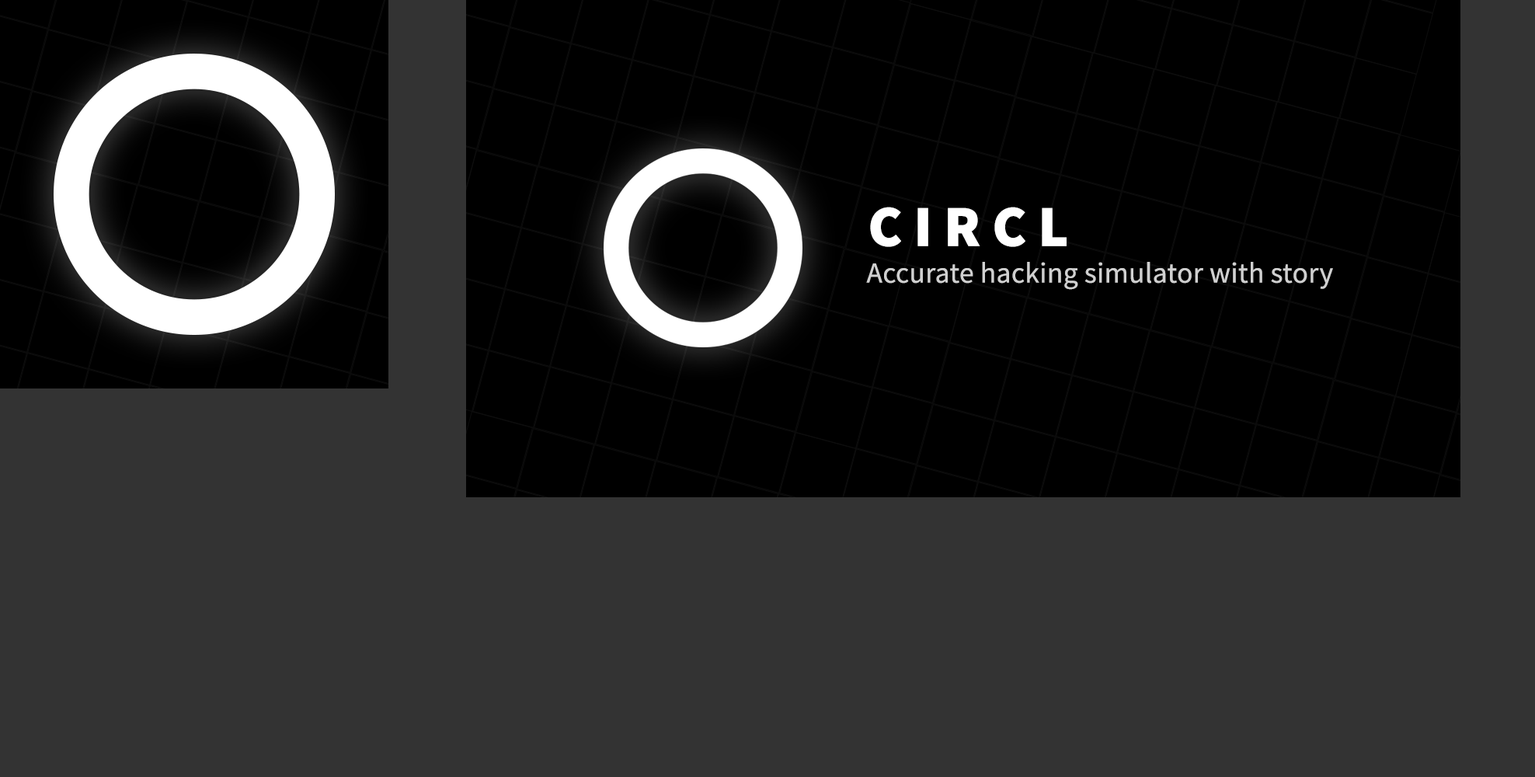
<style>
.page{position:relative;width:1535px;height:777px;background:#333333}
.page>*{position:absolute;margin:0}
.t1{font:58.3px "SourceSansRoman-Black";letter-spacing:0.2em;color:#ffffff}
.t2{font:29.1px "SourceSansRoman-Regular";letter-spacing:0.01em;color:#d0d0d0}
</style>
<div class="page">
<p class="t1" style="left:870px;top:207px;width:197px;height:40px">CIRCL</p>
<p class="t2" style="left:866px;top:262px;width:467px;height:28px">Accurate hacking simulator with story</p>
</div>
